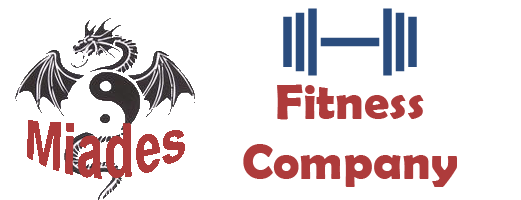
<style>
.page{position:relative;width:521px;height:200px;background:#ffffff}
.page>*{position:absolute;margin:0}
.t1{font:50px "BerlinSansFBDemi-Bold";color:#ae3b3b}
</style>
<div class="page">
<p class="t1" style="left:243px;top:84px;width:214px;height:103px;text-align:center">Fitness<br>Company</p>
</div>
